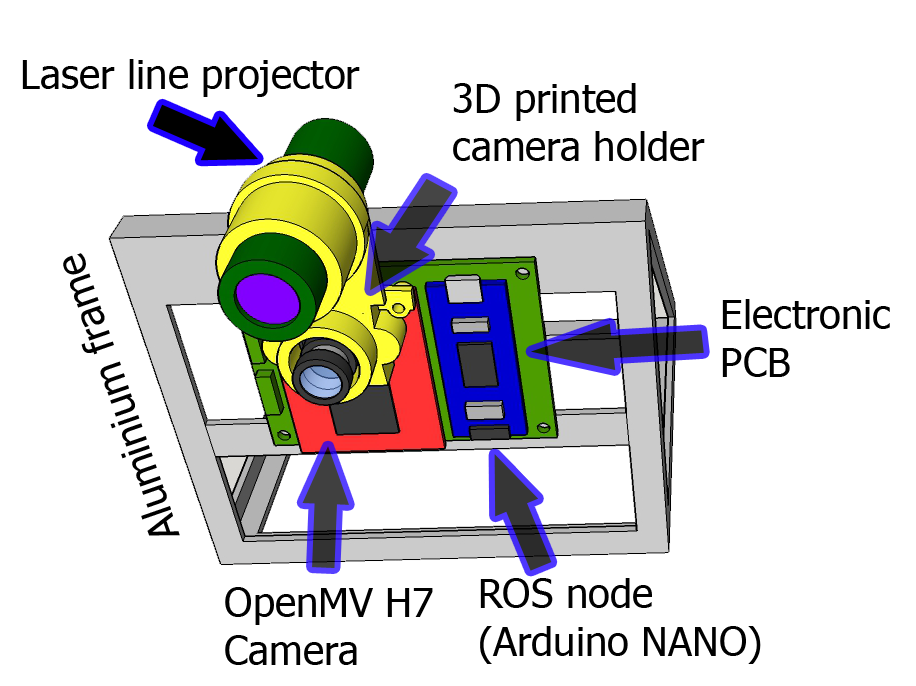
<style>
.page{position:relative;width:916px;height:686px;background:#ffffff}
.page>*{position:absolute;margin:0}
.t1{font:40px "Tahoma";color:#000000}
</style>
<div class="page">
<p class="t1" style="left:22px;top:59px;width:338px;height:38px">Laser line projector</p>
<p class="t1" style="left:453px;top:83px;width:252px;height:78px">3D printed <br>camera holder</p>
<p class="t1" style="left:63px;top:253px;width:117px;height:283px;rotate:-109deg">Aluminium frame</p>
<p class="t1" style="left:722px;top:299px;width:168px;height:78px">Electronic <br>PCB</p>
<p class="t1" style="left:480px;top:578px;width:281px;height:86px">ROS node<br>(Arduino NANO)</p>
<p class="t1" style="left:225px;top:587px;width:208px;height:78px">OpenMV H7<br>Camera</p>
</div>
